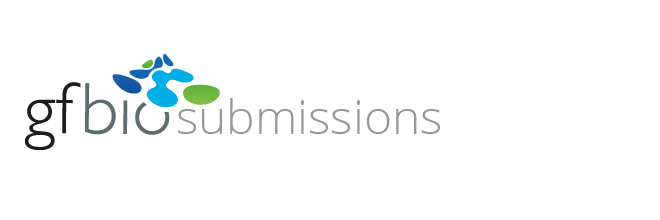
<style>
.page{position:relative;width:660px;height:220px;background:#ffffff}
.page>*{position:absolute;margin:0}
.t1{font:48px "OpenSans-Light";color:#969696}
</style>
<div class="page">
<p class="t1" style="left:178px;top:98px;width:262px;height:36px">submissions</p>
</div>
